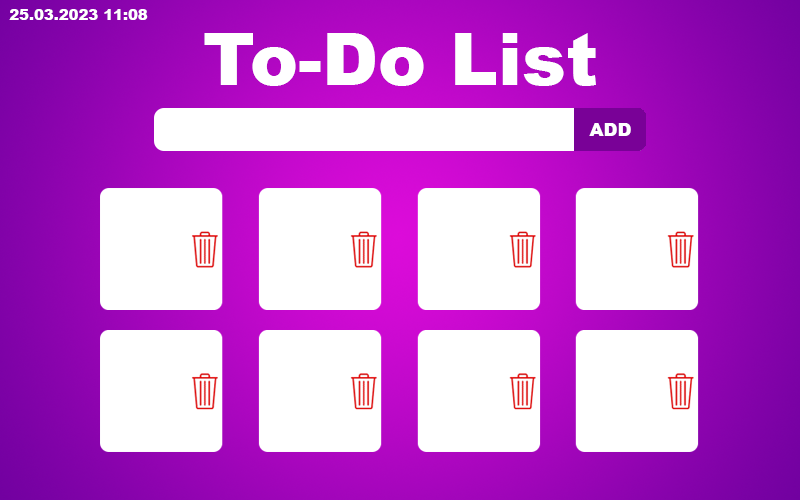
<style>
.page{position:relative;width:800px;height:500px;background:#ffffff}
.page>*{position:absolute;margin:0}
.t1{font:14.8px "Arial-Black";color:#ffffff}
.t2{font:72px "Arial-Black";color:#ffffff}
.t3{font:18px "Arial-Black";color:#ffffff}
</style>
<div class="page">
<p class="t1" style="left:9px;top:9px;width:139px;height:11px">25.03.2023 11:08</p>
<p class="t2" style="left:204px;top:33px;width:392px;height:53px">To-Do List</p>
<p class="t3" style="left:589px;top:123px;width:42px;height:13px">ADD</p>
</div>
